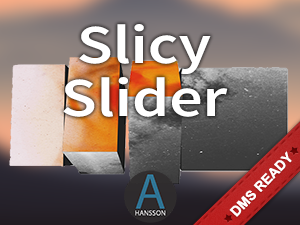
<style>
.page{position:relative;width:300px;height:225px}
.page>*{position:absolute;margin:0}
.t1{font:55px/53px "SourceSansPro-Semibold";color:#ffffff;scale:1.2 1}
.t2{font:13.8px "Arial-BoldMT";color:#ffffff;text-transform:uppercase}
</style>
<div class="page">
<p class="t1" style="left:63px;top:24px;width:165px;height:93px;text-align:center">Slicy<br>Slider</p>
<p class="t2" style="left:229px;top:151px;width:63px;height:66px;rotate:-46deg">DMS Ready</p>
</div>
